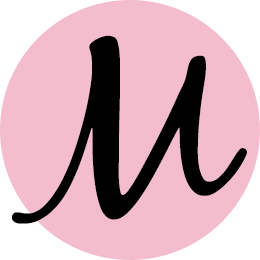
<style>
.page{position:relative;width:260px;height:260px;background:#f3bdcd}
.page>*{position:absolute;margin:0}
.t1{font:240px "BlackJackRegular";color:#000000}
</style>
<div class="page">
<p class="t1" style="left:12px;top:35px;width:235px;height:189px">M</p>
</div>
